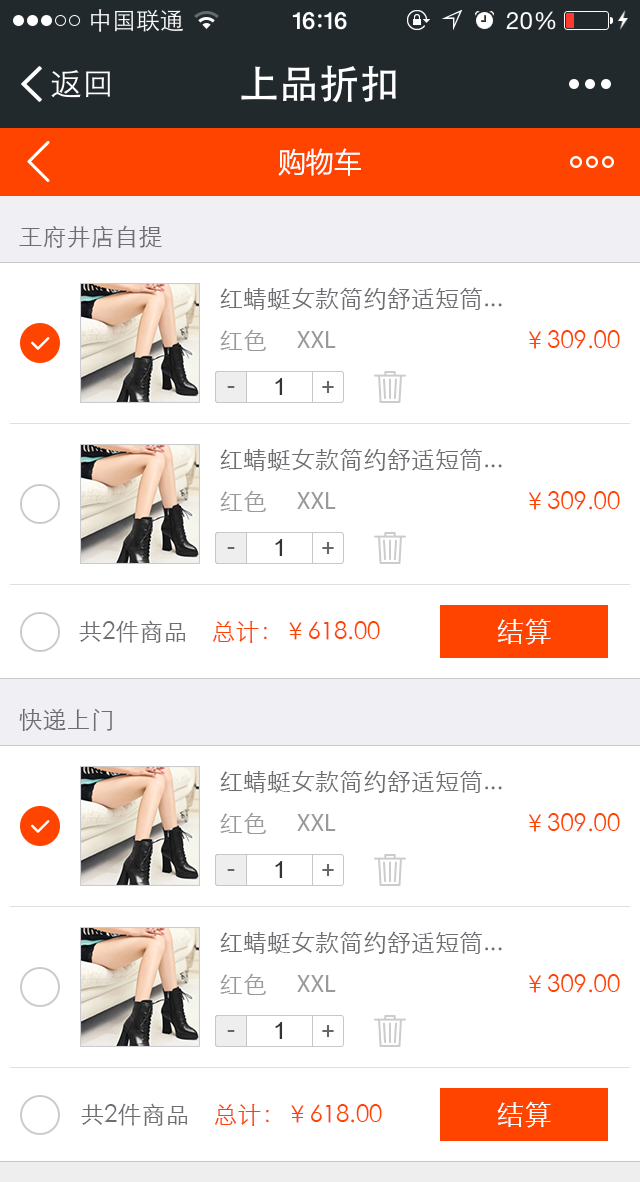
<style>
.page{position:relative;width:640px;height:1182px;background:#ffffff}
.page>*{position:absolute;margin:0}
.t1{font:28px "MicrosoftYaHei";color:#ffffff}
.t2{font:24px "STXihei";color:#6d6d72}
.t3{font:24px "MyriadPro-Regular";color:#999999}
.t4{font:24px "STXihei";color:#999999}
.t5{font:24px "STXihei";color:#ff4400}
.t6{font:24px "ArialMT";color:#666666}
.t7{font:24px "ArialMT";color:#333333}
.t8{font:28px "STXihei";color:#ffffff}
</style>
<div class="page">
<p class="t1" style="left:278px;top:148px;width:83px;height:28px">购物车</p>
<p class="t2" style="left:19px;top:225px;width:143px;height:23px">王府井店自提</p>
<p class="t2" style="left:220px;top:287px;width:282px;height:23px">红蜻蜓女款简约舒适短筒...</p>
<p class="t3" style="left:220px;top:329px;width:116px;height:22px"><span class="t4">红色     </span>XXL</p>
<p class="t5" style="left:528px;top:330px;width:92px;height:19px">￥309.00</p>
<p class="t6" style="left:227px;top:386px;width:8px;height:2px">-</p>
<p class="t7" style="left:275px;top:378px;width:8px;height:17px">1</p>
<p class="t6" style="left:322px;top:381px;width:12px;height:12px;rotate:180deg">+</p>
<p class="t2" style="left:220px;top:448px;width:282px;height:23px">红蜻蜓女款简约舒适短筒...</p>
<p class="t3" style="left:220px;top:490px;width:116px;height:22px"><span class="t4">红色     </span>XXL</p>
<p class="t5" style="left:528px;top:491px;width:92px;height:19px">￥309.00</p>
<p class="t7" style="left:275px;top:539px;width:8px;height:17px">1</p>
<p class="t6" style="left:322px;top:542px;width:12px;height:12px;rotate:180deg">+</p>
<p class="t6" style="left:227px;top:547px;width:8px;height:2px">-</p>
<p class="t5" style="left:79px;top:620px;width:301px;height:23px"><span class="t2">共2件商品　</span>总计：￥618.00</p>
<p class="t8" style="left:497px;top:618px;width:54px;height:27px">结算</p>
<p class="t2" style="left:19px;top:708px;width:93px;height:23px">快递上门</p>
<p class="t2" style="left:220px;top:770px;width:282px;height:23px">红蜻蜓女款简约舒适短筒...</p>
<p class="t3" style="left:220px;top:812px;width:116px;height:22px"><span class="t4">红色     </span>XXL</p>
<p class="t5" style="left:528px;top:813px;width:92px;height:19px">￥309.00</p>
<p class="t6" style="left:227px;top:869px;width:8px;height:2px">-</p>
<p class="t7" style="left:275px;top:861px;width:8px;height:17px">1</p>
<p class="t6" style="left:322px;top:864px;width:12px;height:12px;rotate:180deg">+</p>
<p class="t2" style="left:220px;top:931px;width:282px;height:23px">红蜻蜓女款简约舒适短筒...</p>
<p class="t3" style="left:220px;top:973px;width:116px;height:22px"><span class="t4">红色     </span>XXL</p>
<p class="t5" style="left:528px;top:974px;width:92px;height:19px">￥309.00</p>
<p class="t7" style="left:275px;top:1022px;width:8px;height:17px">1</p>
<p class="t6" style="left:322px;top:1025px;width:12px;height:12px;rotate:180deg">+</p>
<p class="t6" style="left:227px;top:1030px;width:8px;height:2px">-</p>
<p class="t5" style="left:81px;top:1103px;width:301px;height:23px"><span class="t2">共2件商品　</span>总计：￥618.00</p>
<p class="t8" style="left:497px;top:1101px;width:54px;height:27px">结算</p>
</div>
